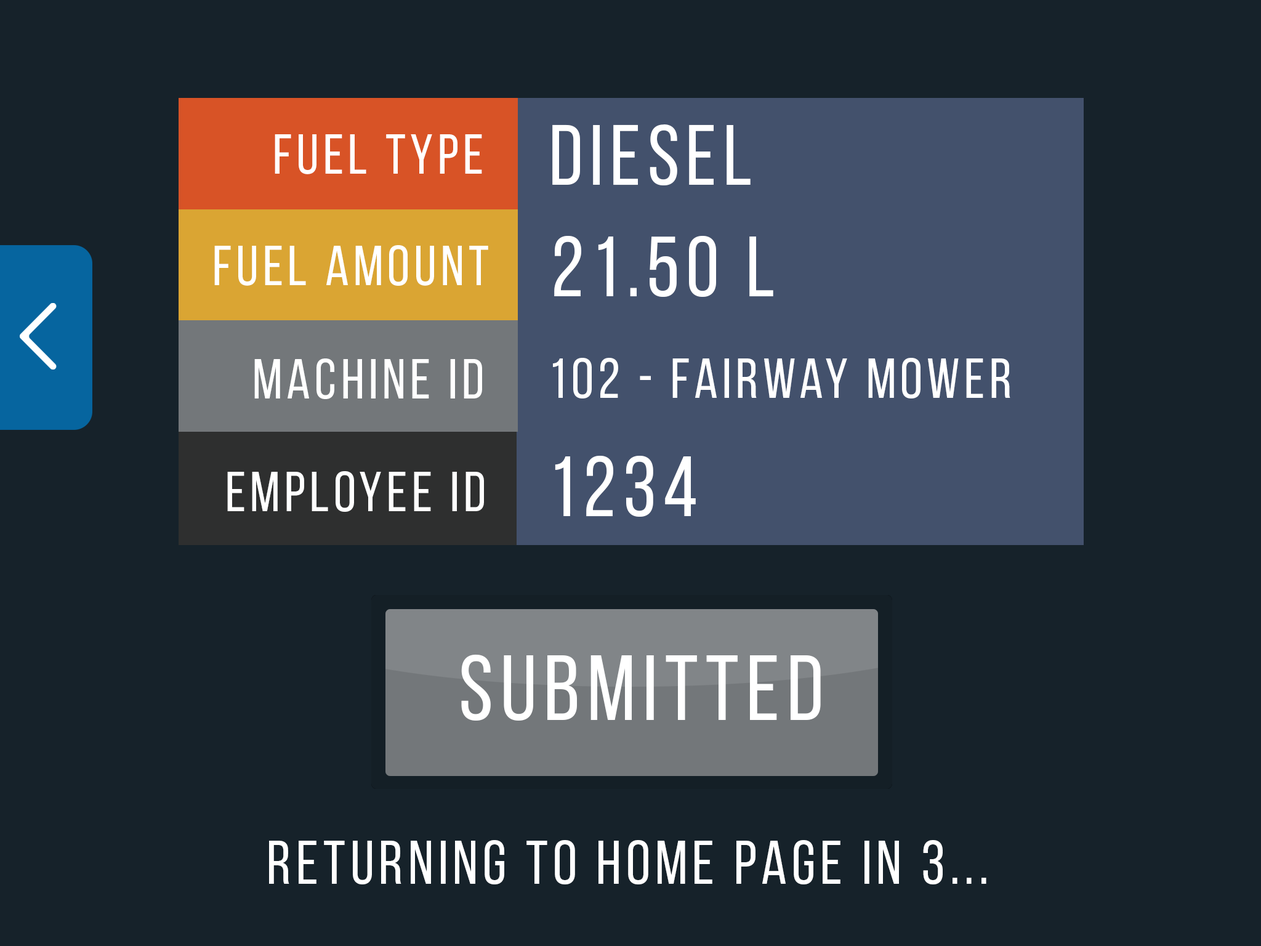
<style>
.page{position:relative;width:1261px;height:946px;background:#16222a}
.page>*{position:absolute;margin:0}
.t1{font:85.1px "BebasNeueRegular";letter-spacing:0.08em;color:#ffffff}
.t2{font:56.7px "BebasNeueRegular";letter-spacing:0.08em;color:#ffffff}
.t3{font:13.6px "BebasNeueRegular";letter-spacing:0.08em;color:#ffffff}
.t4{font:92.4px "BebasNeueRegular";letter-spacing:0.08em;color:#ffffff}
.t5{font:61.6px "BebasNeueRegular";letter-spacing:0.08em;color:#ffffff}
</style>
<div class="page">
<p class="t1" style="left:552px;top:124px;width:199px;height:61px">DIESEL</p>
<p class="t2" style="left:275px;top:134px;width:207px;height:40px">fuel type</p>
<p class="t2" style="left:214px;top:245px;width:274px;height:41px">fuel amount</p>
<p class="t1" style="left:554px;top:235px;width:219px;height:62px">21.50 L</p>
<p class="t3" style="left:254px;top:358px;width:228px;height:41px;text-align:right">machine id</p>
<p class="t2" style="left:553px;top:358px;width:457px;height:40px">102 - Fairway mower</p>
<p class="t1" style="left:555px;top:455px;width:141px;height:62px">1234</p>
<p class="t2" style="left:227px;top:471px;width:257px;height:41px">employee id</p>
<p class="t4" style="left:461px;top:654px;width:360px;height:66px">submitted</p>
<p class="t5" style="left:269px;top:840px;width:717px;height:44px">returning to home page in 3...</p>
</div>
